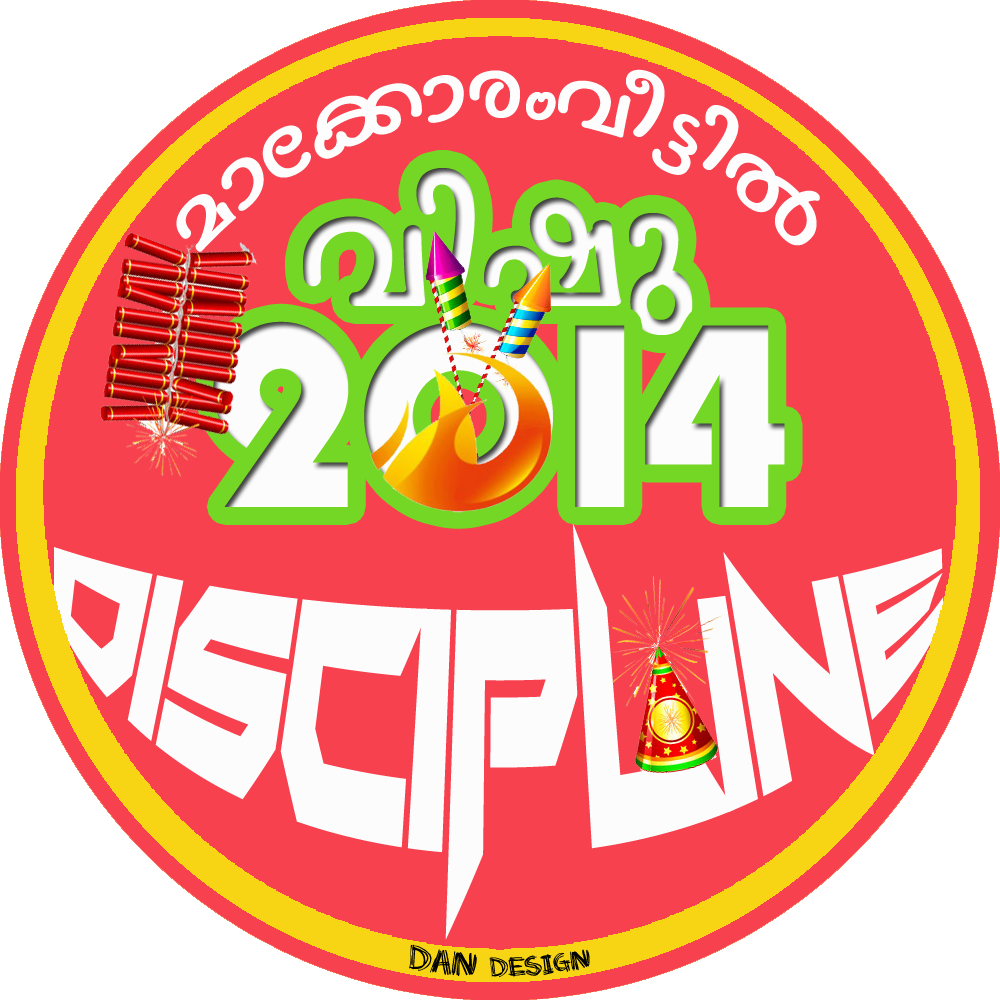
<style>
.page{position:relative;width:1000px;height:1000px;background:#f7414e}
.page>*{position:absolute;margin:0}
.t1{font:109.6px "FML-Nanditha";color:#fdfdfd;scale:0.9 1}
.t2{font:211.8px "FML-Nanditha";color:#fcfcfc}
.t3{font:272.3px "PumpDemiBoldLetPlain";color:#fcfcfc}
.t4{font:94.3px/70.8px "FoughtKnightVictory";color:#fcfcfc;scale:1.17 1}
.t5{font:19.4px "Scratchmyback";color:#030303}
.t6{font:24.3px "Scratchmyback";color:#030303}
</style>
<div class="page">
<p class="t1" style="left:176px;top:69px;width:644px;height:183px">amt¡mcwho«nÂ</p>
<p class="t2" style="left:303px;top:168px;width:390px;height:167px">hnjp</p>
<p class="t3" style="left:213px;top:321px;width:572px;height:190px">2014</p>
<p class="t4" style="left:54px;top:523px;width:890px;height:417px">DisCIPLINE</p>
<p class="t5" style="left:409px;top:944px;width:181px;height:33px"><span class="t6">Dan </span>Design</p>
</div>
